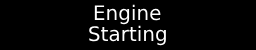
<style>
.page{position:relative;width:256px;height:50px;background:#000000}
.page>*{position:absolute;margin:0}
.t1{font:20px "DejaVuSans";color:#ffffff}
</style>
<div class="page">
<p class="t1" style="left:94px;top:4px;width:67px;height:21px">Engine</p>
<p class="t1" style="left:89px;top:25px;width:77px;height:21px">Starting</p>
</div>
